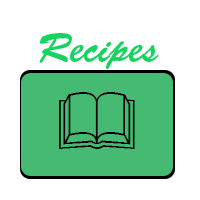
<style>
.page{position:relative;width:200px;height:200px;background:#ffffff}
.page>*{position:absolute;margin:0}
.t1{font:40px "BrushScriptStd";color:#16d35f}
</style>
<div class="page">
<p class="t1" style="left:39px;top:33px;width:120px;height:37px">Recipes</p>
</div>
